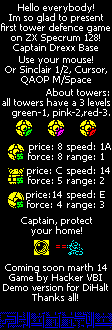
<style>
.page{position:relative;width:112px;height:330px;background:#000000}
.page>*{position:absolute;margin:0}
.t1{font:10px/10px "Tahoma";color:#ffffff}
</style>
<div class="page">
<p class="t1" style="left:1px;top:3px;width:109px;height:50px;text-align:center">Hello everybody!<br>Im so glad to present<br>first tower defence game<br>on ZX Specrum 128!<br>Captain Drexx Base</p>
<p class="t1" style="left:5px;top:56px;width:102px;height:29px;text-align:center">Use your mouse!<br>Or Sinclair 1/2, Cursor,<br>QAOP M/Space</p>
<p class="t1" style="left:2px;top:88px;width:108px;height:30px;text-align:right">About towers:<br>all towers have a 3 levels<br>green-1, pink-2,red-3.</p>
<p class="t1" style="left:28px;top:143px;width:34px;height:17px;text-align:right">price: 8<br>force: 8</p>
<p class="t1" style="left:67px;top:142px;width:44px;height:20px">speed: 1A<br>range: 1</p>
<p class="t1" style="left:27px;top:167px;width:35px;height:17px;text-align:right">price: C<br>force: 5</p>
<p class="t1" style="left:67px;top:166px;width:43px;height:20px">speed: 14<br>range: 2</p>
<p class="t1" style="left:26px;top:191px;width:36px;height:17px;text-align:right">price:14<br>force: 4</p>
<p class="t1" style="left:67px;top:190px;width:38px;height:20px">speed: E<br>range: 3</p>
<p class="t1" style="left:21px;top:217px;width:71px;height:19px;text-align:center">Captain, protect<br>your home!</p>
<p class="t1" style="left:3px;top:263px;width:105px;height:38px;text-align:center">Coming soon marth 14<br>Game by Hacker VBI<br>Demo version for DiHalt<br>Thanks all!</p>
</div>
